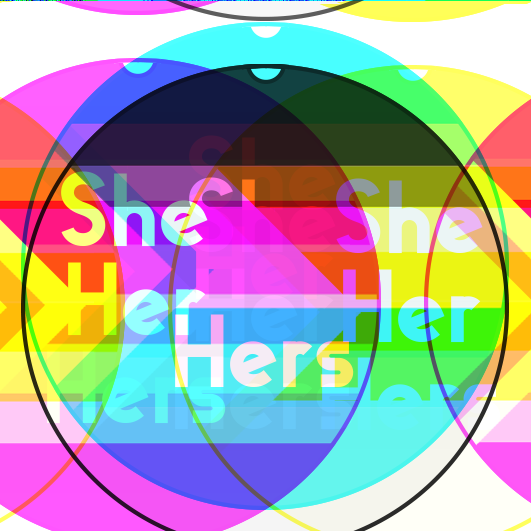
<style>
.page{position:relative;width:531px;height:531px}
.page>*{position:absolute;margin:0}
.t1{font:103.7px "GilbertBoldPreview4"}
</style>
<div class="page">
<p class="t1" style="left:189px;top:134px;width:147px;height:76px">She</p>
<p class="t1" style="left:196px;top:225px;width:138px;height:74px">Her</p>
<p class="t1" style="left:175px;top:313px;width:179px;height:74px">Hers</p>
</div>
